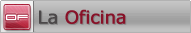
<style>
.page{position:relative;width:191px;height:33px}
.page>*{position:absolute;margin:0}
.t1{font:11.6px "911Porscha";color:#ffffff}
.t2{font:18px "Verdana";letter-spacing:-0.025em;color:#881811;font-weight:bold}
.t3{font:18px "Verdana";letter-spacing:-0.025em;color:#4b4848;font-weight:bold}
.t4{font:18px "Verdana";letter-spacing:-0.025em;font-weight:bold}
</style>
<div class="page">
<p class="t1" style="left:6px;top:14px;width:22px;height:7px">Of</p>
<p class="t2" style="left:39px;top:9px;width:87px;height:15px"><span class="t3">La </span>Oficina</p>
<p class="t4" style="left:40px;top:10px;width:87px;height:15px">La Oficina</p>
</div>
